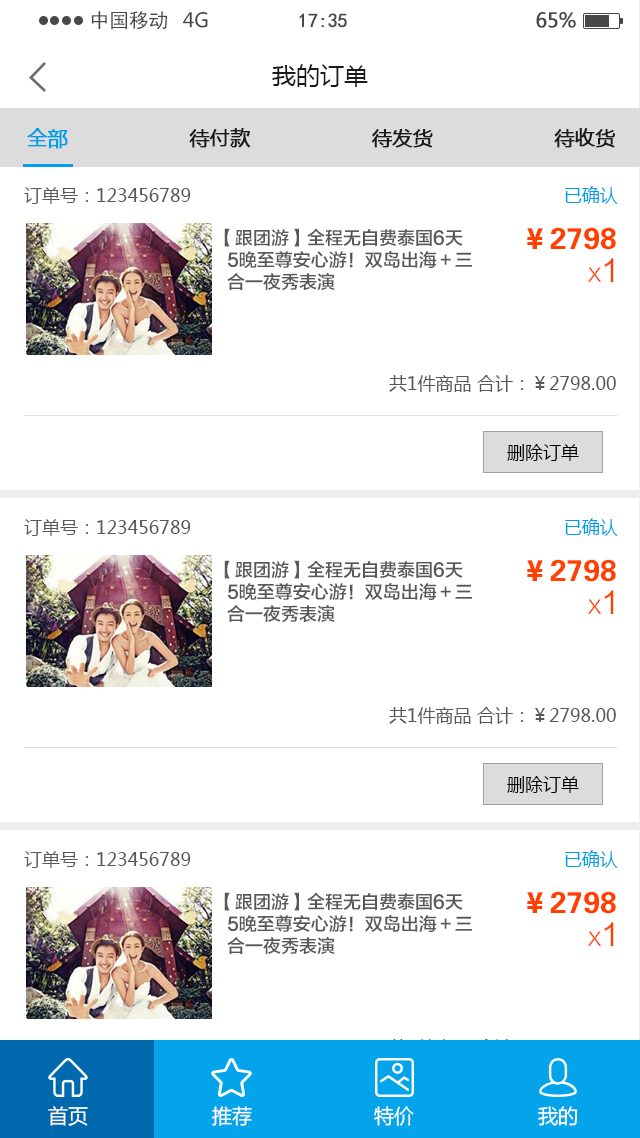
<style>
.page{position:relative;width:640px;height:1138px;background:#ffffff}
.page>*{position:absolute;margin:0}
.t1{font:19.7px "SimHei";color:#484848}
.t2{font:19.7px "MicrosoftYaHei";color:#484848}
.t3{font:19.7px "SimHei";letter-spacing:-0.022em;color:#484848;font-weight:bold}
.t4{font:19.7px "MicrosoftYaHei";letter-spacing:-0.022em;color:#484848;font-weight:bold}
.t5{font:24px "MicrosoftYaHei";color:#1c1a16}
.t6{font:19.8px "MicrosoftYaHei";color:#1c1a16;font-weight:bold}
.t7{font:19.8px "MicrosoftYaHei";color:#00a0e9;font-weight:bold}
.t8{font:18px "MicrosoftYaHei";color:#585858}
.t9{font:18px "MicrosoftYaHei";color:#00a0e9}
.t10{font:18px/22px "FZLTZHK--GBK1-0";color:#585858}
.t11{font:30px "FZDHTK--GBK1-0";color:#ff4000}
.t12{font:18px "FZLTHJW--GB1-0";color:#ff4000}
.t13{font:30px "FZLTHJW--GB1-0";color:#ff4000}
.t14{font:18px "MicrosoftYaHei";color:#000000}
.t15{font:20px "MicrosoftYaHei";color:#ffffff}
</style>
<div class="page">
<p class="t1" style="left:91px;top:11px;width:76px;height:19px">中国移动</p>
<p class="t2" style="left:183px;top:12px;width:25px;height:16px">4G</p>
<p class="t3" style="left:299px;top:13px;width:48px;height:15px">17:35</p>
<p class="t4" style="left:536px;top:12px;width:40px;height:16px">65%</p>
<p class="t5" style="left:272px;top:64px;width:96px;height:23px">我的订单</p>
<p class="t6" style="left:27px;top:128px;width:589px;height:21px"><span class="t7">全部</span>                   待付款                   待发货                   待收货</p>
<p class="t8" style="left:24px;top:186px;width:594px;height:18px">订单号：123456789                                                                      <span class="t9">已确认</span></p>
<p class="t10" style="left:224px;top:228px;width:248px;height:63px">【跟团游】全程无自费泰国6天<br>  5晚至尊安心游！双岛出海＋三<br>  合一夜秀表演</p>
<p class="t11" style="left:527px;top:227px;width:89px;height:23px">￥2798</p>
<p class="t12" style="left:588px;top:258px;width:26px;height:24px">X<span class="t13">1</span></p>
<p class="t8" style="left:389px;top:375px;width:227px;height:17px">共1件商品 合计：￥2798.00</p>
<p class="t14" style="left:507px;top:444px;width:72px;height:17px">删除订单</p>
<p class="t8" style="left:24px;top:518px;width:594px;height:18px">订单号：123456789                                                                      <span class="t9">已确认</span></p>
<p class="t10" style="left:224px;top:560px;width:248px;height:63px">【跟团游】全程无自费泰国6天<br>  5晚至尊安心游！双岛出海＋三<br>  合一夜秀表演</p>
<p class="t11" style="left:527px;top:559px;width:89px;height:23px">￥2798</p>
<p class="t12" style="left:588px;top:590px;width:26px;height:24px">X<span class="t13">1</span></p>
<p class="t8" style="left:389px;top:707px;width:227px;height:17px">共1件商品 合计：￥2798.00</p>
<p class="t14" style="left:507px;top:776px;width:72px;height:17px">删除订单</p>
<p class="t8" style="left:24px;top:850px;width:594px;height:18px">订单号：123456789                                                                      <span class="t9">已确认</span></p>
<p class="t10" style="left:224px;top:892px;width:248px;height:63px">【跟团游】全程无自费泰国6天<br>  5晚至尊安心游！双岛出海＋三<br>  合一夜秀表演</p>
<p class="t11" style="left:527px;top:891px;width:89px;height:23px">￥2798</p>
<p class="t12" style="left:588px;top:922px;width:26px;height:24px">X<span class="t13">1</span></p>
<p class="t15" style="left:48px;top:1106px;width:40px;height:20px">首页</p>
<p class="t15" style="left:212px;top:1106px;width:40px;height:20px">推荐</p>
<p class="t15" style="left:374px;top:1106px;width:40px;height:20px">特价</p>
<p class="t15" style="left:538px;top:1106px;width:40px;height:20px">我的</p>
</div>
